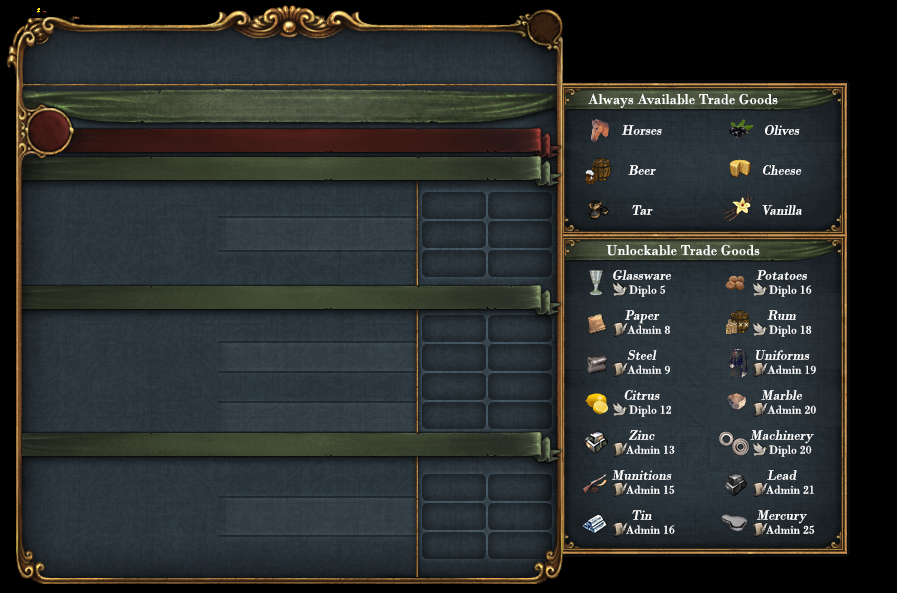
<style>
.page{position:relative;width:897px;height:593px}
.page>*{position:absolute;margin:0}
.t1{font:15px "BodoniMT";color:#ffffff}
.t2{font:14px "BodoniMT";color:#ffffff;font-style:italic}
.t3{font:14px/14px "BodoniMT";color:#ffffff;font-style:italic}
.t4{font:12px/14px "BodoniMT";color:#ffffff}
</style>
<div class="page">
<p class="t1" style="left:588px;top:93px;width:190px;height:15px">Always Available Trade Goods</p>
<p class="t2" style="left:621px;top:125px;width:41px;height:10px">Horses</p>
<p class="t2" style="left:765px;top:125px;width:35px;height:10px">Olives</p>
<p class="t2" style="left:628px;top:165px;width:28px;height:10px">Beer</p>
<p class="t2" style="left:763px;top:165px;width:39px;height:10px">Cheese</p>
<p class="t2" style="left:632px;top:205px;width:21px;height:10px">Tar</p>
<p class="t2" style="left:762px;top:205px;width:40px;height:10px">Vanilla</p>
<p class="t1" style="left:606px;top:244px;width:154px;height:12px">Unlockable Trade Goods</p>
<p class="t3" style="left:613px;top:270px;width:58px;height:27px;text-align:center">Glassware<br><span class="t4">    Diplo 5</span></p>
<p class="t3" style="left:756px;top:270px;width:56px;height:27px;text-align:center">Potatoes<br><span class="t4">      Diplo 16</span></p>
<p class="t4" style="left:625px;top:310px;width:45px;height:24px;text-align:center"><span class="t3">Paper<br></span>     Admin 8</p>
<p class="t4" style="left:767px;top:310px;width:45px;height:27px;text-align:center"><span class="t3">Rum<br></span>      Diplo 18</p>
<p class="t4" style="left:627px;top:350px;width:43px;height:25px;text-align:center"><span class="t3">Steel<br></span>     Admin 9</p>
<p class="t3" style="left:756px;top:350px;width:60px;height:25px;text-align:center">Uniforms<br><span class="t4">       Admin 19</span></p>
<p class="t4" style="left:624px;top:390px;width:47px;height:27px;text-align:center"><span class="t3">Citrus<br></span>      Diplo 12</p>
<p class="t4" style="left:761px;top:390px;width:55px;height:24px;text-align:center"><span class="t3">Marble<br></span>       Admin 20</p>
<p class="t4" style="left:626px;top:430px;width:49px;height:24px;text-align:center"><span class="t3">Zinc<br></span>      Admin 13</p>
<p class="t3" style="left:750px;top:430px;width:64px;height:27px;text-align:center">Machinery<br><span class="t4">      Diplo 20</span></p>
<p class="t3" style="left:612px;top:470px;width:63px;height:24px;text-align:center">Munitions<br><span class="t4">      Admin 15</span></p>
<p class="t4" style="left:766px;top:470px;width:48px;height:24px;text-align:center"><span class="t3">Lead<br></span>      Admin 21</p>
<p class="t4" style="left:626px;top:510px;width:49px;height:24px;text-align:center"><span class="t3">Tin<br></span>      Admin 16</p>
<p class="t4" style="left:757px;top:510px;width:58px;height:24px;text-align:center"><span class="t3">Mercury<br></span>      Admin 25</p>
</div>
